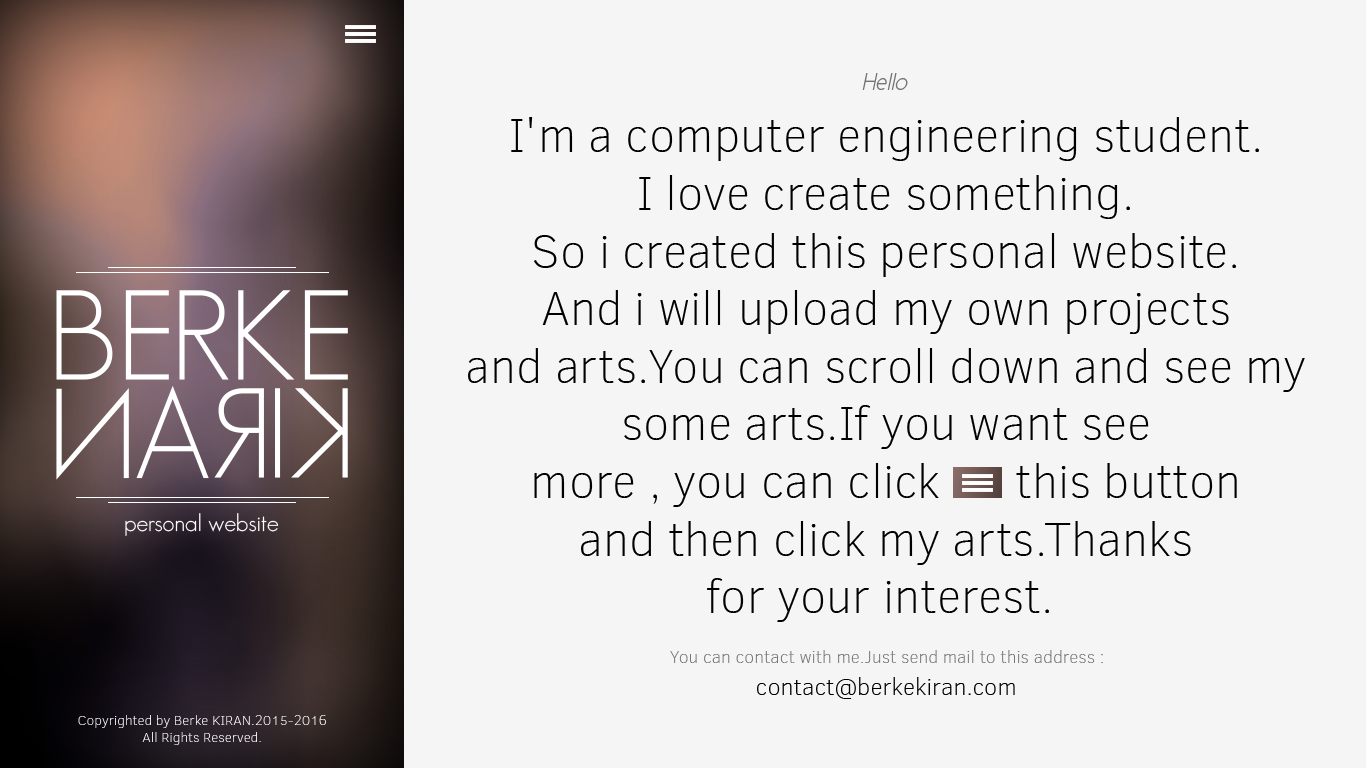
<style>
.page{position:relative;width:1366px;height:768px;background:#f5f5f5}
.page>*{position:absolute;margin:0}
.t1{font:24px "CicleFinaItalic";color:#757575}
.t2{font:48px "ClearSans-Thin";color:#000000}
.t3{font:125px "GeosansLight";color:#ffffff}
.t4{font:24px "GeosansLight";color:#ffffff}
.t5{font:18px "ClearSans-Thin";color:#757575}
.t6{font:24px "ClearSans-Thin";color:#000000}
.t7{font:14px "ClearSans-Thin";color:#ffffff}
</style>
<div class="page">
<p class="t1" style="left:862px;top:73px;width:46px;height:17px">Hello</p>
<p class="t2" style="left:468px;top:117px;width:837px;height:505px;text-align:center">I'm a computer engineering student.<br>I love create something.<br>So i created this personal website.<br>And i will upload my own projects<br>and arts.You can scroll down and see my<br>some arts.If you want see<br>more , you can click      this button<br>and then click my arts.Thanks<br>for your interest.</p>
<p class="t3" style="left:56px;top:290px;width:292px;height:90px">BERKE</p>
<p class="t3" style="left:56px;top:385px;width:292px;height:95px;rotate:180deg">KIRAN</p>
<p class="t4" style="left:125px;top:513px;width:154px;height:23px">personal website</p>
<p class="t5" style="left:670px;top:650px;width:433px;height:13px">You can contact with me.Just send mail to this address :</p>
<p class="t6" style="left:757px;top:677px;width:258px;height:22px">contact@berkekiran.com</p>
<p class="t7" style="left:78px;top:715px;width:248px;height:30px;text-align:center">Copyrighted by Berke KIRAN.2015-2016 <br>All Rights Reserved.</p>
</div>
